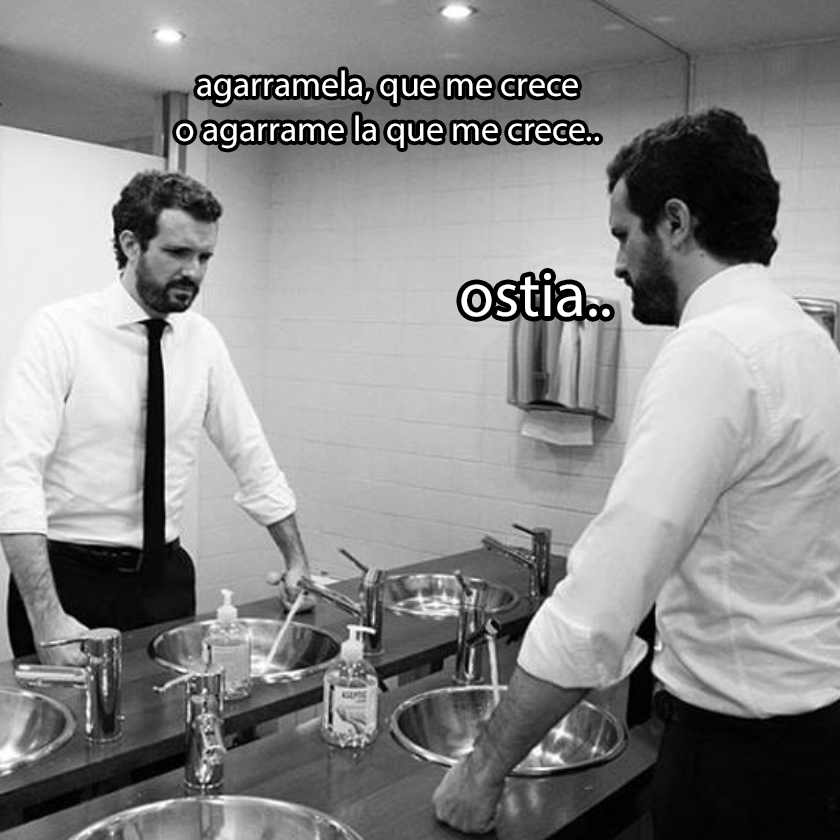
<style>
.page{position:relative;width:840px;height:840px}
.page>*{position:absolute;margin:0}
.t1{font:35.8px "MyriadPro-Regular";color:#ffffff}
.t2{font:63.7px "MyriadPro-Regular";color:#ffffff}
</style>
<div class="page">
<p class="t1" style="left:176px;top:70px;width:423px;height:79px;text-align:center">agarramela, que me crece<br>o agarrame la que me crece..</p>
<p class="t2" style="left:461px;top:273px;width:149px;height:44px">ostia..</p>
</div>
